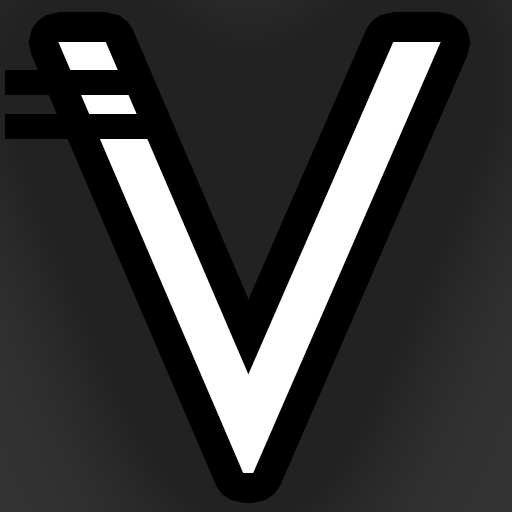
<style>
.page{position:relative;width:512px;height:512px;background:#222222}
.page>*{position:absolute;margin:0}
.t1{font:600px "CenturyGothic";color:#ffffff}
</style>
<div class="page">
<p class="t1" style="left:58px;top:42px;width:383px;height:431px">V</p>
</div>
